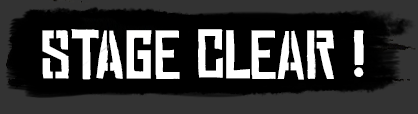
<style>
.page{position:relative;width:418px;height:114px;background:#000000}
.page>*{position:absolute;margin:0}
.t1{font:65.9px "ChineseRocksRg-Regular";color:#ffffff}
</style>
<div class="page">
<p class="t1" style="left:42px;top:29px;width:322px;height:51px">STAGE CLEAR !</p>
</div>
